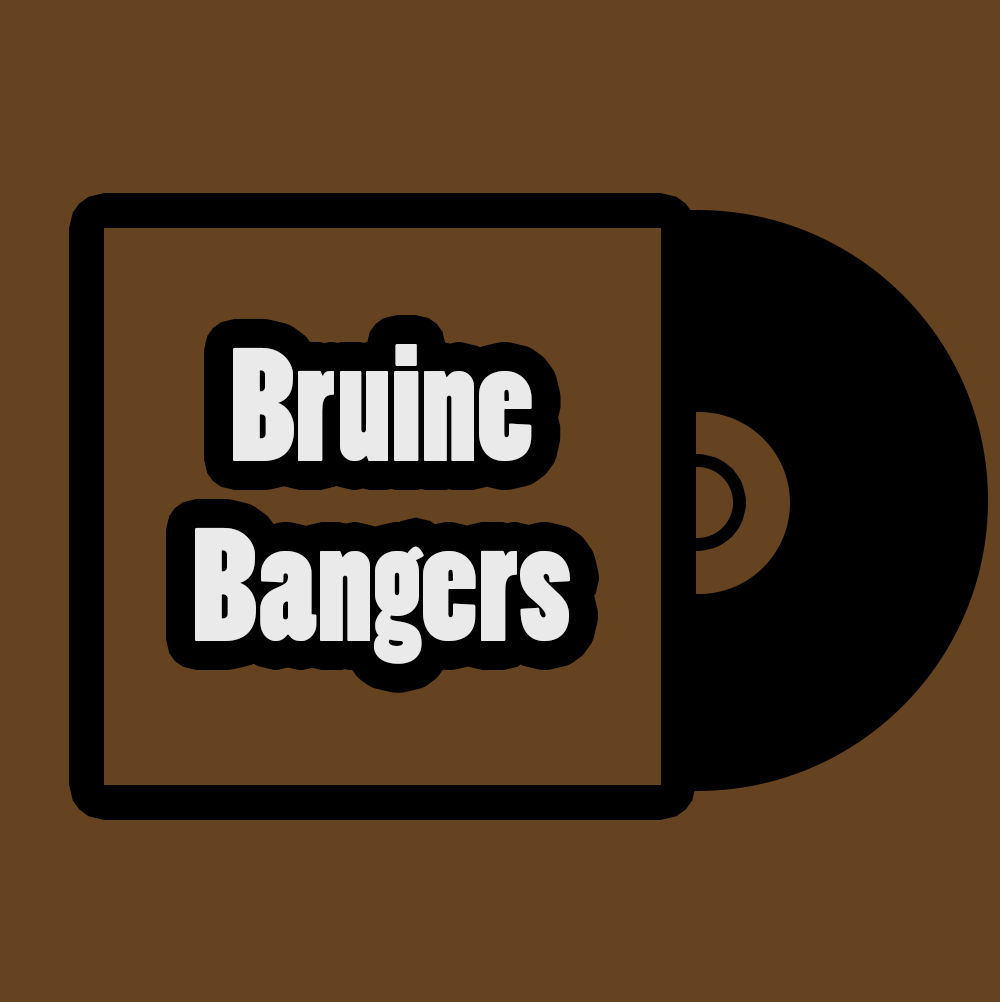
<style>
.page{position:relative;width:1000px;height:1002px;background:#654321}
.page>*{position:absolute;margin:0}
.t1{font:150px "PoplarStd";color:#eaeaea}
</style>
<div class="page">
<p class="t1" style="left:195px;top:344px;width:375px;height:320px;text-align:center">Bruine<br>Bangers</p>
</div>
